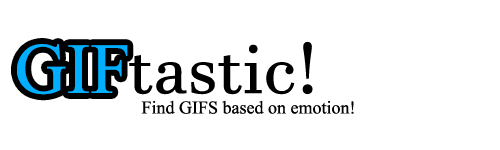
<style>
.page{position:relative;width:500px;height:150px;background:#ffffff}
.page>*{position:absolute;margin:0}
.t1{font:72px "JavaneseText";color:#000000}
.t2{font:72px "MongolianBaiti";color:#02afff}
.t3{font:18px "MongolianBaiti";color:#000000}
</style>
<div class="page">
<p class="t1" style="left:129px;top:41px;width:184px;height:54px">tastic!</p>
<p class="t2" style="left:17px;top:44px;width:111px;height:51px">GIF</p>
<p class="t3" style="left:141px;top:100px;width:213px;height:14px">Find GIFS based on emotion!</p>
</div>
